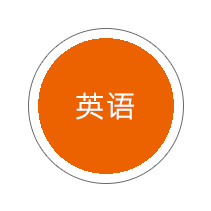
<style>
.page{position:relative;width:211px;height:211px;background:#ffffff}
.page>*{position:absolute;margin:0}
.t1{font:30px "MicrosoftJhengHeiUIRegular";color:#ffffff;font-weight:bold}
</style>
<div class="page">
<p class="t1" style="left:76px;top:92px;width:58px;height:28px">英语</p>
</div>
